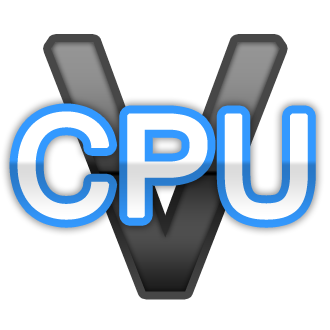
<style>
.page{position:relative;width:330px;height:330px;background:#ffffff}
.page>*{position:absolute;margin:0}
.t1{font:621.9px "Gautami";font-weight:bold}
.t2{font:260px "Gautami";color:#fefefe;font-weight:bold}
</style>
<div class="page">
<p class="t1" style="left:51px;top:42px;width:229px;height:250px">V</p>
<p class="t2" style="left:17px;top:111px;width:291px;height:109px">CPU</p>
</div>
